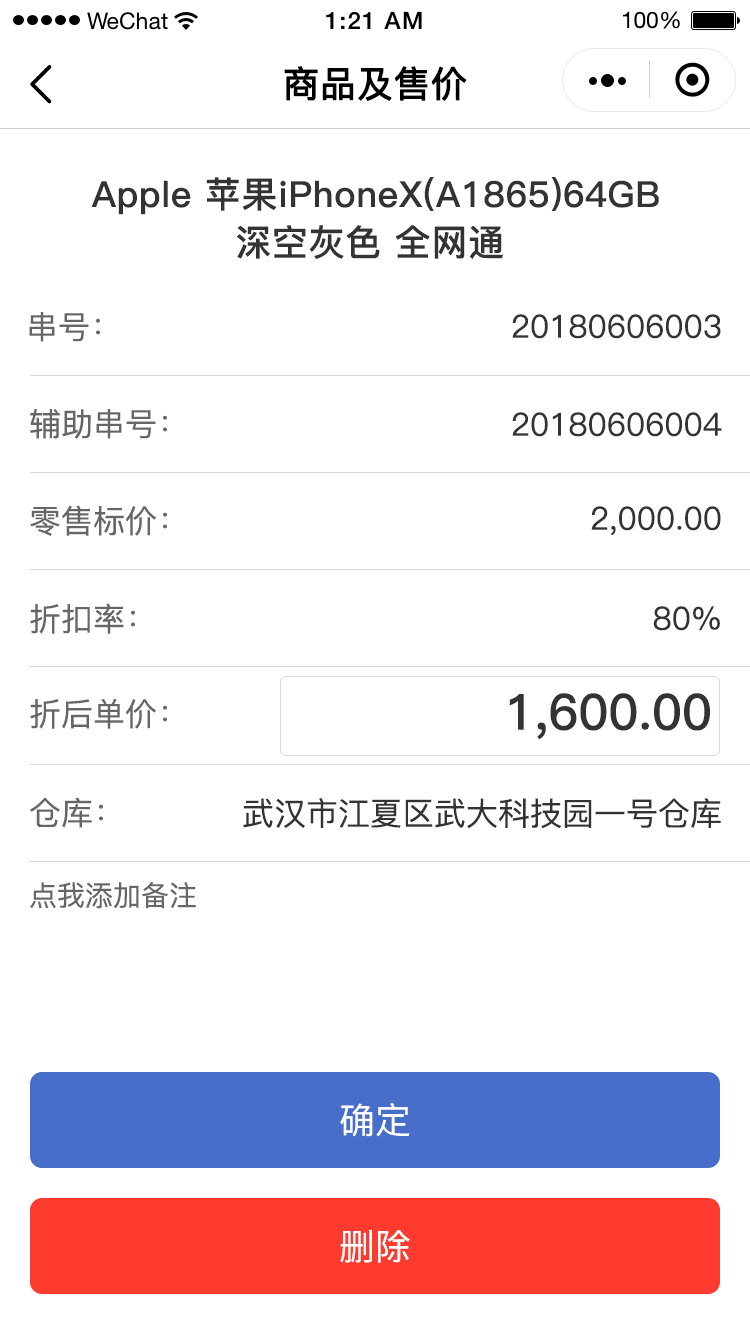
<style>
.page{position:relative;width:750px;height:1334px;background:#ffffff}
.page>*{position:absolute;margin:0}
.t1{font:36px "PingFang-SC-Medium";color:#000000;font-weight:bold}
.t2{font:36px/48px "PingFang-SC-Bold";letter-spacing:0.02em;color:#333333}
.t3{font:32px "PingFang-SC-Medium";color:#666666}
.t4{font:32px "PingFang-SC-Medium";color:#333333}
.t5{font:50px "PingFang-SC-Bold";color:#333333}
.t6{font:28px "PingFang-SC-Medium";color:#666666}
.t7{font:36px "PingFang-SC-Medium";color:#ffffff}
</style>
<div class="page">
<p class="t1" style="left:284px;top:66px;width:183px;height:35px">商品及售价</p>
<p class="t2" style="left:91px;top:177px;width:568px;height:82px;text-align:center">Apple 苹果iPhoneX(A1865)64GB<br>深空灰色 全网通</p>
<p class="t3" style="left:29px;top:312px;width:71px;height:30px">串号：</p>
<p class="t4" style="left:512px;top:314px;width:209px;height:25px">20180606003</p>
<p class="t3" style="left:30px;top:409px;width:137px;height:30px">辅助串号：</p>
<p class="t4" style="left:512px;top:412px;width:210px;height:25px">20180606004</p>
<p class="t3" style="left:30px;top:505px;width:137px;height:31px">零售标价：</p>
<p class="t4" style="left:591px;top:506px;width:130px;height:30px">2,000.00</p>
<p class="t3" style="left:30px;top:603px;width:105px;height:31px">折扣率：</p>
<p class="t4" style="left:653px;top:606px;width:67px;height:25px">80%</p>
<p class="t3" style="left:30px;top:698px;width:137px;height:31px">折后单价：</p>
<p class="t5" style="left:509px;top:693px;width:201px;height:47px">1,600.00</p>
<p class="t3" style="left:30px;top:797px;width:73px;height:31px">仓库：</p>
<p class="t4" style="left:243px;top:798px;width:478px;height:31px">武汉市江夏区武大科技园一号仓库</p>
<p class="t6" style="left:30px;top:882px;width:166px;height:27px">点我添加备注</p>
<p class="t7" style="left:340px;top:1103px;width:70px;height:34px">确定</p>
<p class="t7" style="left:340px;top:1229px;width:70px;height:34px">删除</p>
</div>
